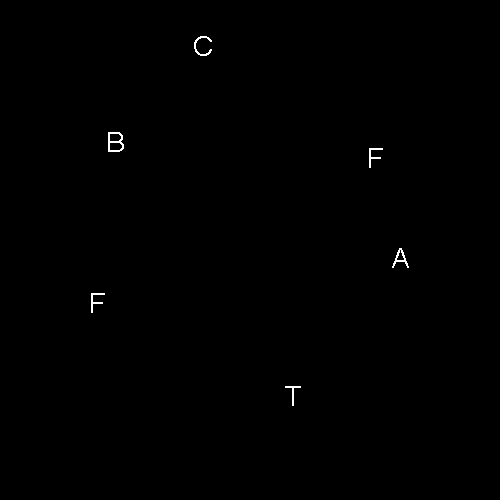
<style>
.page{position:relative;width:500px;height:500px;background:#000000}
.page>*{position:absolute;margin:0}
.t1{font:28.3px "ArialMT";color:#ffffff}
</style>
<div class="page">
<p class="t1" style="left:194px;top:36px;width:18px;height:20px">C</p>
<p class="t1" style="left:108px;top:132px;width:16px;height:20px">B</p>
<p class="t1" style="left:369px;top:148px;width:14px;height:20px">F</p>
<p class="t1" style="left:392px;top:248px;width:17px;height:20px">A</p>
<p class="t1" style="left:91px;top:293px;width:14px;height:20px">F</p>
<p class="t1" style="left:285px;top:386px;width:16px;height:20px">T</p>
</div>
